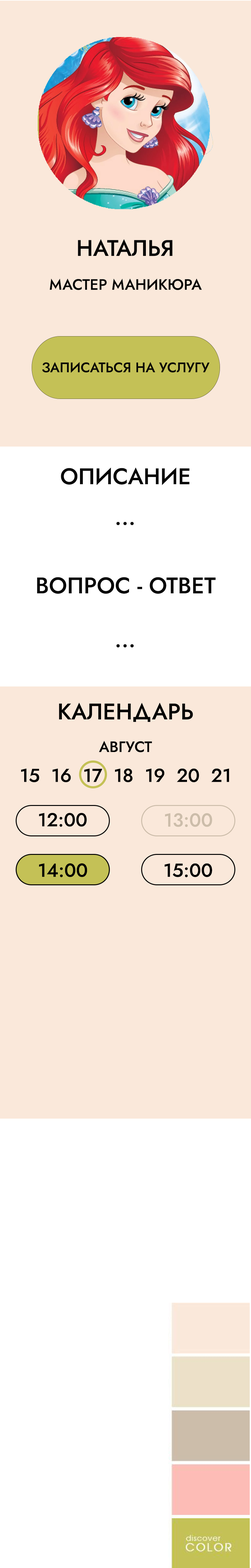
<style>
.page{position:relative;width:251px;height:1568px;background:#fae8da}
.page>*{position:absolute;margin:0}
.t1{font:22.6px "Jost-Medium";color:#050505}
.t2{font:15.1px "Jost-Medium";color:#050505}
.t3{font:13.8px "Jost-Medium";color:#050505}
.t4{font:22.6px "Jost-Medium";color:#000000}
.t5{font:15.1px "Jost-Medium";color:#000000}
.t6{font:18.8px "Jost-Medium";color:#000000}
.t7{font:18.8px "Jost-Medium";color:#ccbdaa}
</style>
<div class="page">
<p class="t1" style="left:78px;top:239px;width:94px;height:17px">НАТАЛЬЯ</p>
<p class="t2" style="left:50px;top:278px;width:152px;height:12px">МАСТЕР МАНИКЮРА</p>
<p class="t3" style="left:42px;top:362px;width:167px;height:11px">ЗАПИСАТЬСЯ НА УСЛУГУ</p>
<p class="t1" style="left:61px;top:467px;width:128px;height:18px">ОПИСАНИЕ</p>
<p class="t1" style="left:116px;top:522px;width:18px;height:3px">...</p>
<p class="t1" style="left:37px;top:577px;width:178px;height:17px">ВОПРОС - ОТВЕТ</p>
<p class="t1" style="left:116px;top:644px;width:18px;height:4px">...</p>
<p class="t4" style="left:59px;top:702px;width:134px;height:20px">КАЛЕНДАРЬ</p>
<p class="t5" style="left:99px;top:741px;width:53px;height:11px">АВГУСТ</p>
<p class="t6" style="left:21px;top:768px;width:208px;height:14px">15  16  17  18  19  20  21</p>
<p class="t6" style="left:39px;top:813px;width:48px;height:14px">12:00</p>
<p class="t7" style="left:165px;top:813px;width:47px;height:14px">13:00</p>
<p class="t6" style="left:39px;top:863px;width:48px;height:14px">14:00</p>
<p class="t6" style="left:164px;top:863px;width:48px;height:14px">15:00</p>
</div>
